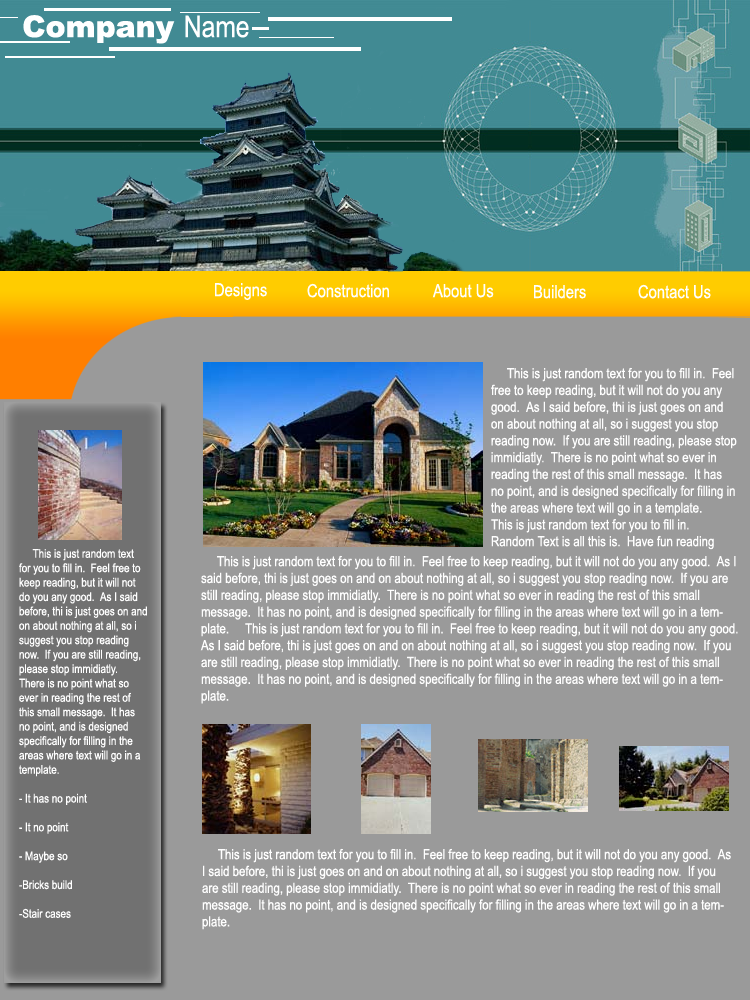
<style>
.page{position:relative;width:750px;height:1000px;background:#9a9a9a}
.page>*{position:absolute;margin:0}
.t1{font:30px "Arial-Black";color:#ffffff}
.t2{font:30px "ArialNarrow";color:#ffffff}
.t3{font:18px "ArialNarrow";color:#ffffff}
.t4{font:14px "ArialNarrow";color:#ffffff}
.t5{font:12px "ArialNarrow";color:#ffffff}
</style>
<div class="page">
<p class="t1" style="left:23px;top:15px;width:226px;height:29px">Company <span class="t2">Name</span></p>
<p class="t3" style="left:215px;top:283px;width:52px;height:17px">Designs</p>
<p class="t3" style="left:307px;top:283px;width:82px;height:15px">Construction</p>
<p class="t3" style="left:432px;top:284px;width:62px;height:14px">About Us</p>
<p class="t3" style="left:534px;top:285px;width:52px;height:14px">Builders</p>
<p class="t3" style="left:638px;top:284px;width:73px;height:15px">Contact Us</p>
<p class="t4" style="left:491px;top:367px;width:246px;height:183px">This is just random text for you to fill in.  Feel free to keep reading, but it will not do you any good.  As I said before, thi is just goes on and on about nothing at all, so i suggest you stop reading now.  If you are still reading, please stop immidiatly.  There is no point what so ever in reading the rest of this small message.  It has no point, and is designed specifically for filling in the areas where text will go in a template.     This is just random text for you to fill in.  Random Text is all this is.  Have fun reading</p>
<p class="t5" style="left:19px;top:549px;width:128px;height:369px">This is just random text for you to fill in.  Feel free to keep reading, but it will not do you any good.  As I said before, thi is just goes on and on about nothing at all, so i suggest you stop reading now.  If you are still reading, please stop immidiatly.  There is no point what so ever in reading the rest of this small message.  It has no point, and is designed specifically for filling in the areas where text will go in a template.<br><br>- It has no point<br><br>- It no point<br><br>- Maybe so<br><br>-Bricks build<br><br>-Stair cases</p>
<p class="t4" style="left:200px;top:555px;width:538px;height:149px">This is just random text for you to fill in.  Feel free to keep reading, but it will not do you any good.  As I said before, thi is just goes on and on about nothing at all, so i suggest you stop reading now.  If you are still reading, please stop immidiatly.  There is no point what so ever in reading the rest of this small message.  It has no point, and is designed specifically for filling in the areas where text will go in a template.     This is just random text for you to fill in.  Feel free to keep reading, but it will not do you any good.  As I said before, thi is just goes on and on about nothing at all, so i suggest you stop reading now.  If you are still reading, please stop immidiatly.  There is no point what so ever in reading the rest of this small message.  It has no point, and is designed specifically for filling in the areas where text will go in a template.</p>
<p class="t4" style="left:202px;top:848px;width:529px;height:82px">This is just random text for you to fill in.  Feel free to keep reading, but it will not do you any good.  As I said before, thi is just goes on and on about nothing at all, so i suggest you stop reading now.  If you are still reading, please stop immidiatly.  There is no point what so ever in reading the rest of this small message.  It has no point, and is designed specifically for filling in the areas where text will go in a template.</p>
</div>
